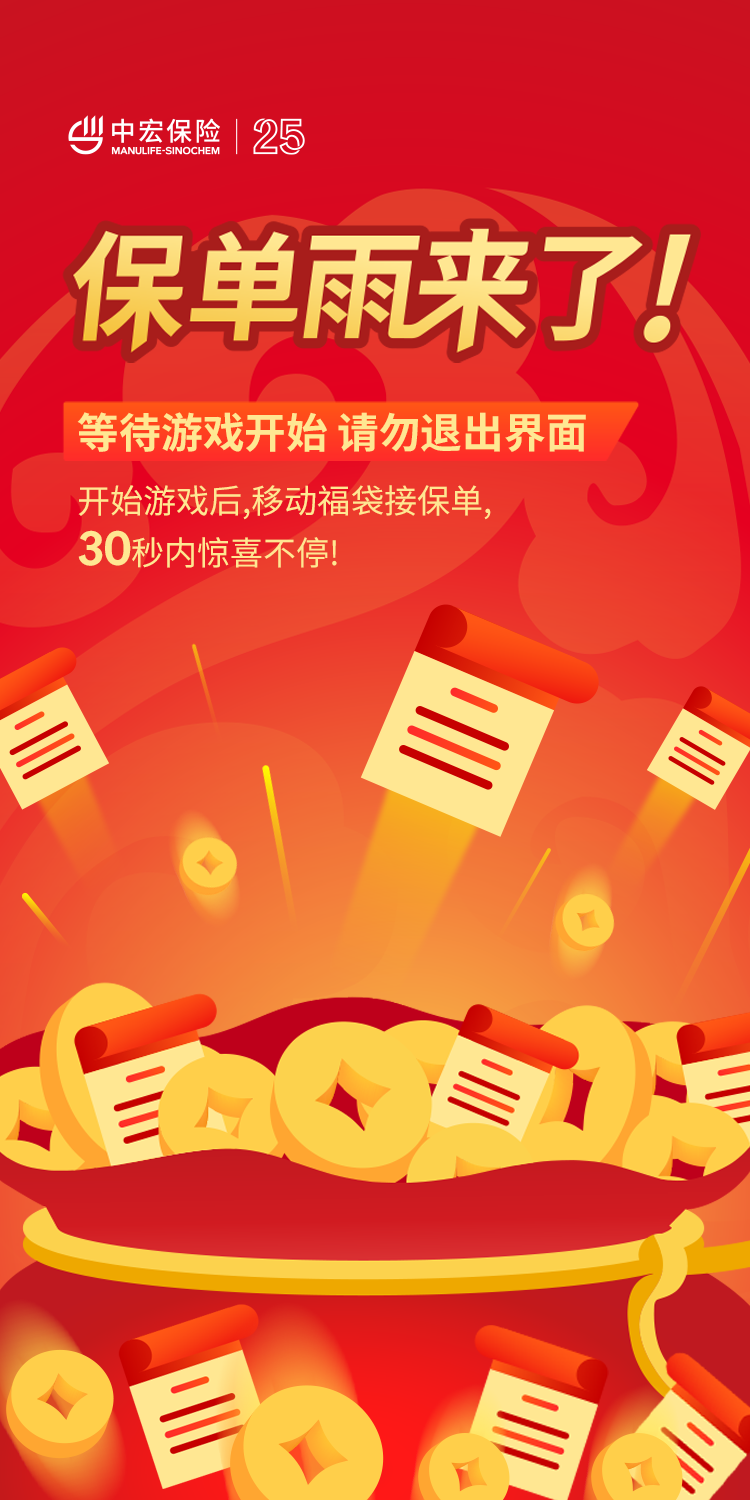
<style>
.page{position:relative;width:750px;height:1500px}
.page>*{position:absolute;margin:0}
.t1{font:41.7px "NotoSansCJKsc-Bold";color:#ffe792}
.t2{font:33.1px/52px "NotoSansCJKsc-Regular";color:#ffe792}
.t3{font:43.5px/52px "ManulifeJHSans-Bold";color:#ffe792}
</style>
<div class="page">
<p class="t1" style="left:77px;top:412px;width:509px;height:40px">等待游戏开始 请勿退出界面</p>
<p class="t2" style="left:78px;top:485px;width:413px;height:83px">开始游戏后,移动福袋接保单,<br><span class="t3">30</span>秒内惊喜不停!</p>
</div>
